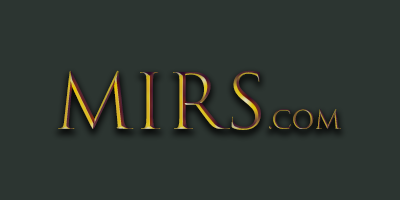
<style>
.page{position:relative;width:400px;height:200px;background:#2c3531}
.page>*{position:absolute;margin:0}
.t1{font:75px "TrajanColor-Concept"}
.t2{font:25px "TrajanColor-Concept"}
</style>
<div class="page">
<p class="t1" style="left:58px;top:70px;width:283px;height:60px">mirs<span class="t2">.com</span></p>
</div>
